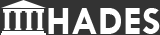
<style>
.page{position:relative;width:160px;height:35px;background:#333333}
.page>*{position:absolute;margin:0}
.t1{font:39.9px "TwCenMT-Bold";color:#ffffff}
</style>
<div class="page">
<p class="t1" style="left:48px;top:8px;width:112px;height:26px">HADES</p>
</div>
